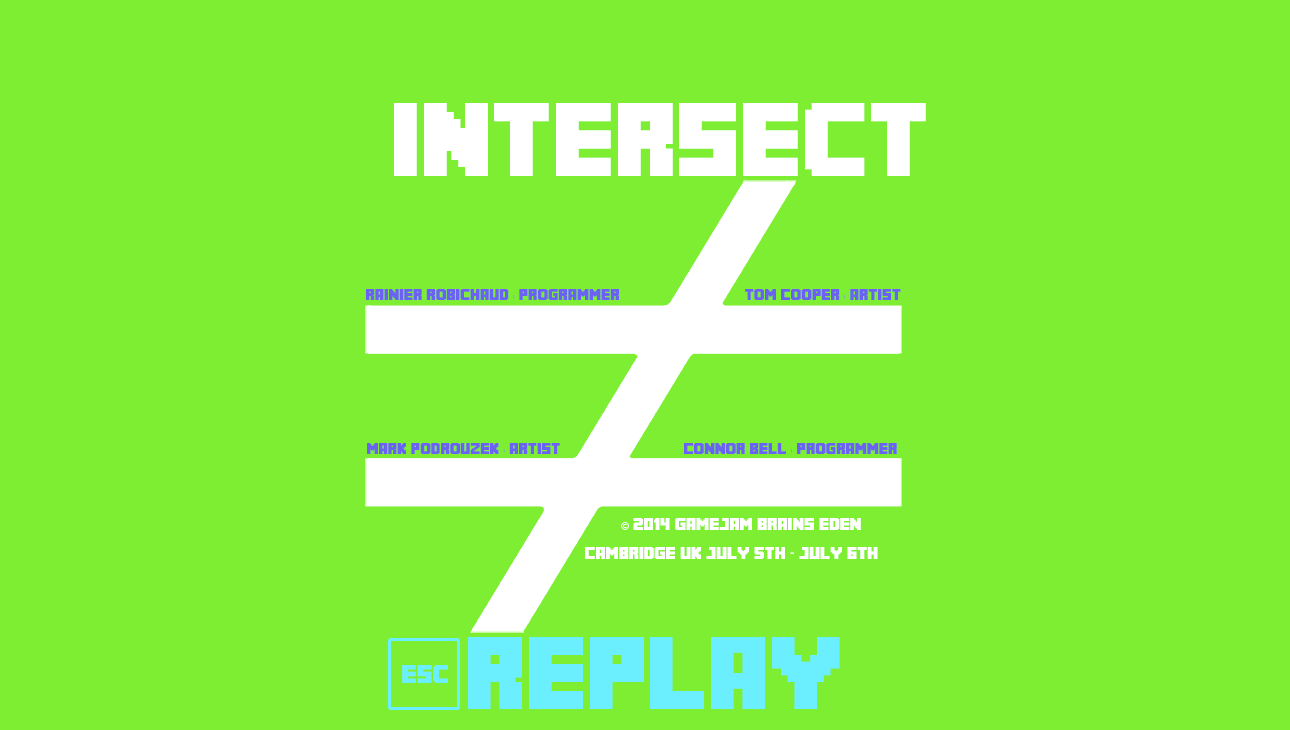
<style>
.page{position:relative;width:1290px;height:730px;background:#7eee33}
.page>*{position:absolute;margin:0}
.t1{font:73px "MineCrafter-3";color:#ffffff}
.t2{font:11px "MineCrafter-3";color:#6b61f2}
.t3{font:12px "MineCrafter-3";color:#ffffff}
.t4{font:12px "MyriadPro-Regular";color:#ffffff}
.t5{font:72px "MineCrafter-3";color:#6befff}
.t6{font:18px "MineCrafter-3";color:#6befff}
</style>
<div class="page">
<p class="t1" style="left:394px;top:103px;width:532px;height:73px">intersect</p>
<p class="t2" style="left:366px;top:289px;width:253px;height:11px">Rainier Robichaud : Programmer</p>
<p class="t2" style="left:745px;top:289px;width:156px;height:11px">Tom Cooper : artist</p>
<p class="t2" style="left:367px;top:443px;width:193px;height:11px">Mark podrouzek : artist</p>
<p class="t2" style="left:684px;top:443px;width:213px;height:11px">Connor bell : Programmer</p>
<p class="t3" style="left:585px;top:518px;width:293px;height:41px"><span class="t4"> ©</span> 2014 gamejam Brains Eden<br><br>Cambridge Uk July 5th - july 6th</p>
<p class="t5" style="left:468px;top:637px;width:372px;height:72px">Replay</p>
<p class="t6" style="left:402px;top:665px;width:46px;height:18px">Esc</p>
</div>
